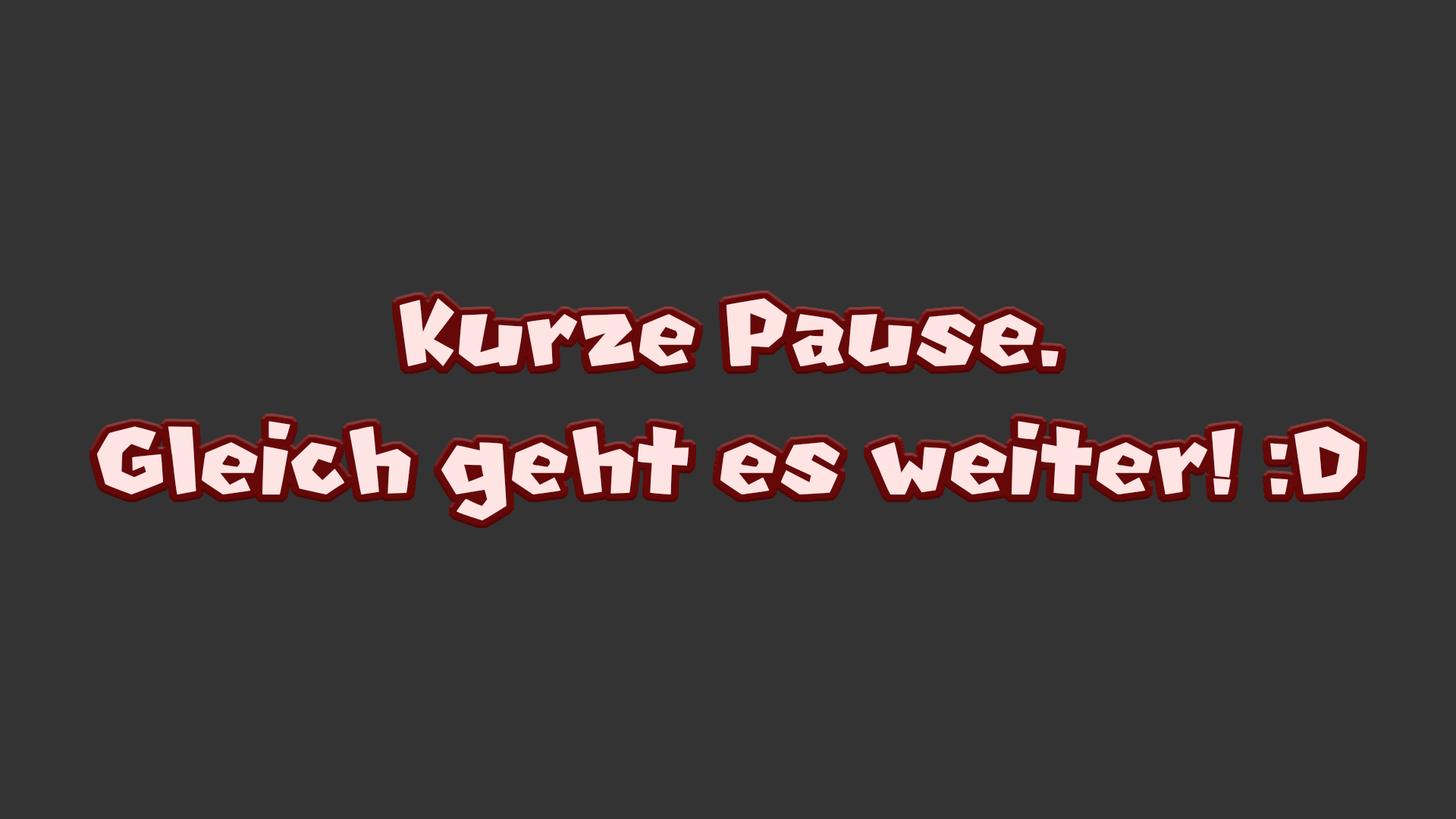
<style>
.page{position:relative;width:1456px;height:819px;background:#333333}
.page>*{position:absolute;margin:0}
.t1{font:106.6px "NewSuperMarioFontU";color:#ffe4e4}
</style>
<div class="page">
<p class="t1" style="left:97px;top:298px;width:1263px;height:223px;text-align:center">Kurze Pause.<br>Gleich geht es weiter! :D</p>
</div>
